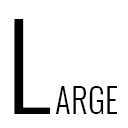
<style>
.page{position:relative;width:128px;height:128px;background:#ffffff}
.page>*{position:absolute;margin:0}
.t1{font:117px "Oswald-Light";color:#000000;text-transform:uppercase}
.t2{font:33px "Oswald-Light";color:#000000;text-transform:uppercase}
</style>
<div class="page">
<p class="t1" style="left:14px;top:19px;width:37px;height:95px">l</p>
<p class="t2" style="left:55px;top:86px;width:62px;height:28px">arge</p>
</div>
